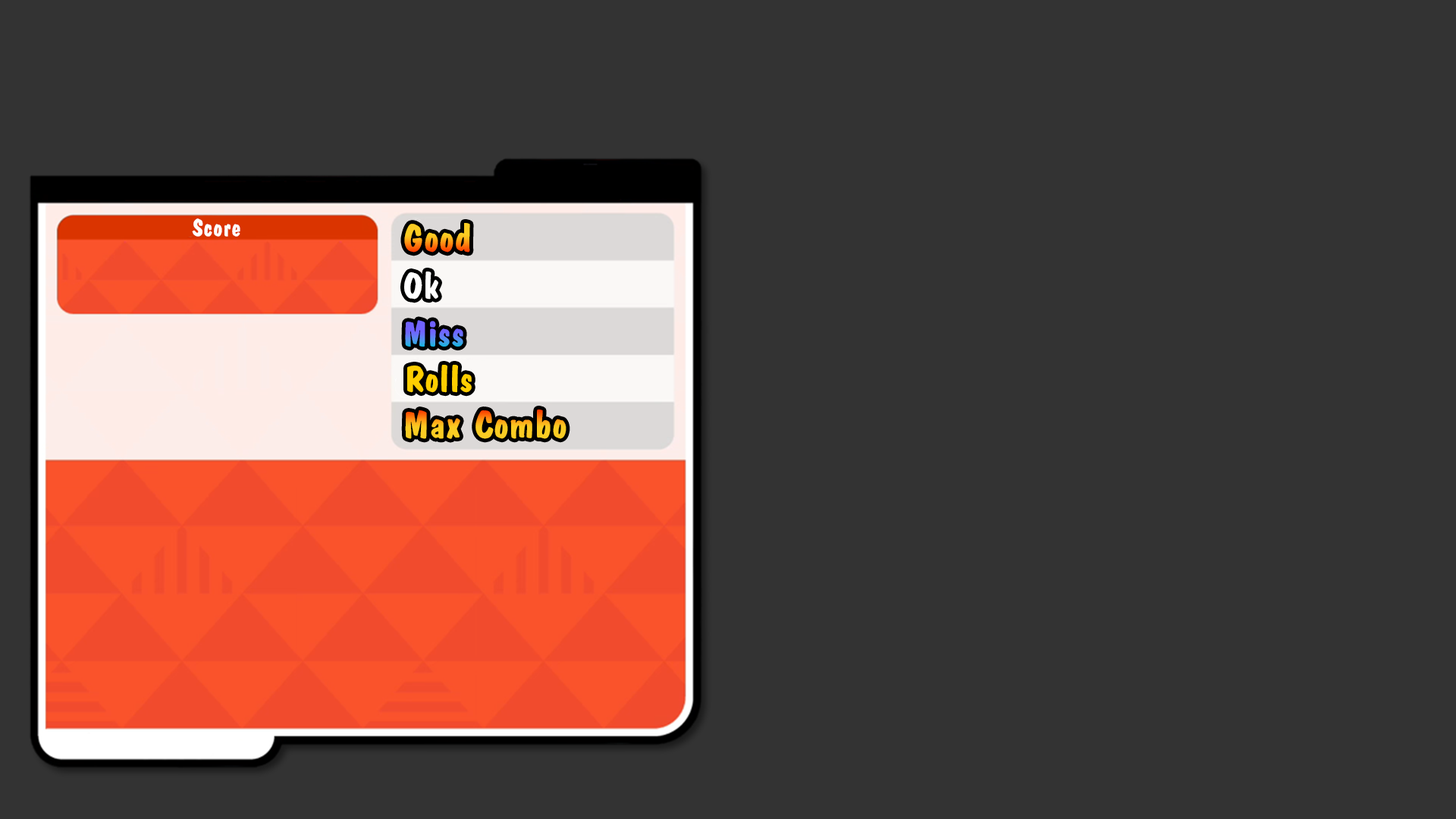
<style>
.page{position:relative;width:1456px;height:819px;background:#333333}
.page>*{position:absolute;margin:0}
.t1{font:25px "Eng-DFPKanteiryu-XB";color:#ffffff}
.t2{font:39.3px "Eng-DFPKanteiryu-XB"}
.t3{font:37.2px "Eng-DFPKanteiryu-XB";color:#ffffff}
.t4{font:36.6px "Eng-DFPKanteiryu-XB"}
.t5{font:37.2px "Eng-DFPKanteiryu-XB";color:#ffce01}
</style>
<div class="page">
<p class="t1" style="left:192px;top:218px;width:48px;height:19px">Score</p>
<p class="t2" style="left:404px;top:223px;width:66px;height:30px">Good</p>
<p class="t3" style="left:404px;top:271px;width:34px;height:29px">Ok</p>
<p class="t4" style="left:405px;top:320px;width:58px;height:27px">Miss</p>
<p class="t5" style="left:407px;top:365px;width:65px;height:28px">Rolls</p>
<p class="t2" style="left:405px;top:409px;width:161px;height:30px">Max Combo</p>
</div>
